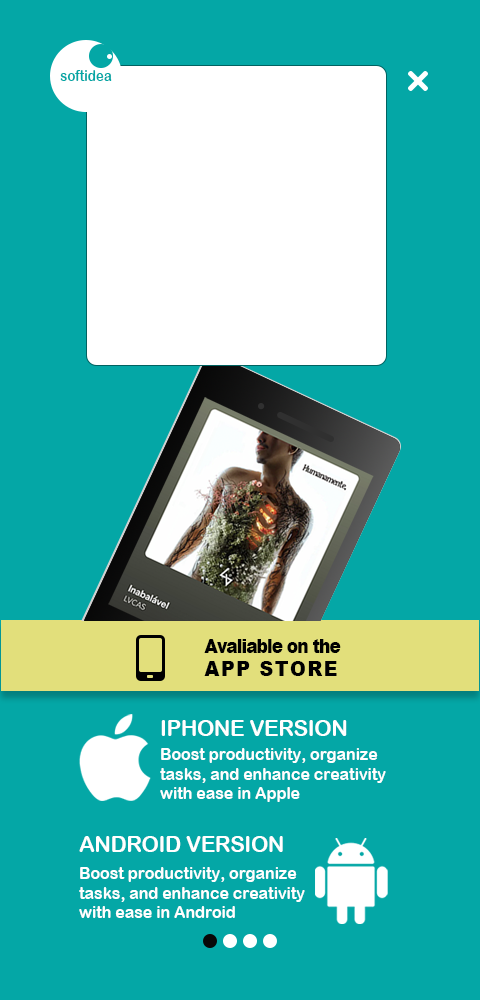
<style>
.page{position:relative;width:480px;height:1000px;background:#04a7a6}
.page>*{position:absolute;margin:0}
.t1{font:14.5px "ArialRoundedMTBold";letter-spacing:-0.01em;color:#04a7a6;scale:0.93 1}
.t2{font:18.6px "Arial-Black";letter-spacing:-0.06em;color:#000000;scale:0.92 1}
.t3{font:20.6px "Arial-Black";letter-spacing:0.08em;color:#000000;scale:0.92 1}
.t4{font:23.3px "ArialRoundedMTBold";letter-spacing:-0.01em;color:#ffffff;scale:0.93 1}
.t5{font:17.5px "ArialRoundedMTBold";letter-spacing:-0.01em;color:#ffffff;scale:0.93 1}
</style>
<div class="page">
<p class="t1" style="left:60px;top:70px;width:52px;height:11px">softidea</p>
<p class="t2" style="left:204px;top:639px;width:137px;height:37px">Avaliable on the<br><span class="t3">APP STORE</span></p>
<p class="t4" style="left:161px;top:720px;width:186px;height:16px">IPHONE VERSION</p>
<p class="t5" style="left:160px;top:748px;width:226px;height:54px">Boost productivity, organize tasks, and enhance creativity with ease in Apple</p>
<p class="t4" style="left:79px;top:836px;width:204px;height:16px">ANDROID VERSION</p>
<p class="t5" style="left:79px;top:867px;width:226px;height:51px">Boost productivity, organize tasks, and enhance creativity with ease in Android</p>
</div>
